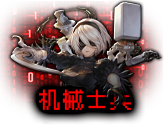
<style>
.page{position:relative;width:164px;height:140px}
.page>*{position:absolute;margin:0}
.t1{font:23.7px "HYPixel-11px-U";color:#ff0000}
</style>
<div class="page">
<p class="t1" style="left:39px;top:89px;width:92px;height:21px">机械士兵</p>
</div>
